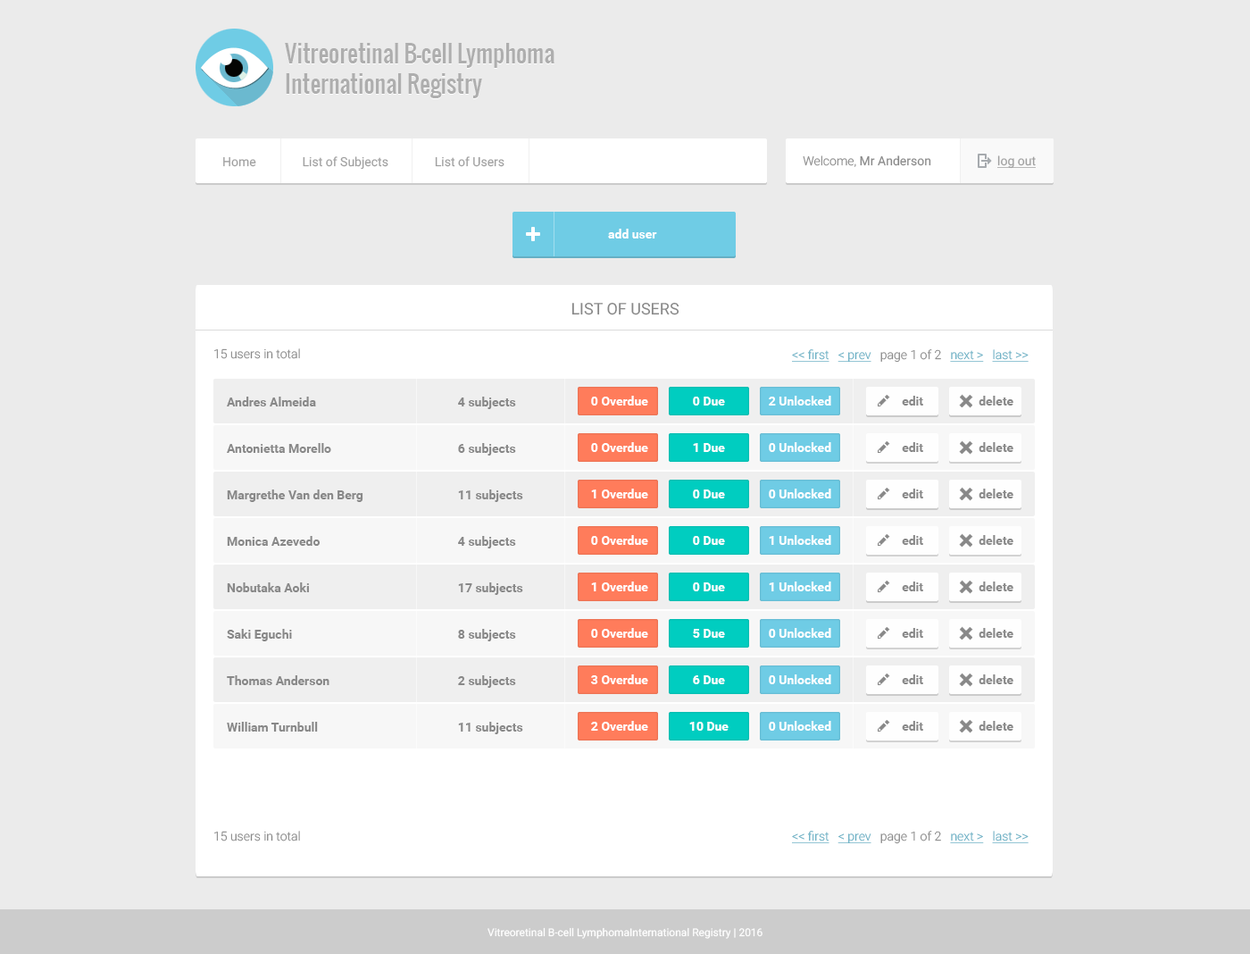
<style>
.page{position:relative;width:1250px;height:954px;background:#ebebeb}
.page>*{position:absolute;margin:0}
.t1{font:23.2px/30.4px "Oswald-Regular";color:#aeaeae}
.t2{font:12.5px "Roboto-Regular";color:#a0a0a0}
.t3{font:12.5px "Roboto-Regular";color:#888888}
.t4{font:12.5px "Roboto-Light";color:#888888}
.t5{font:12.5px "Roboto-Regular";color:#a0a0a0;text-decoration:underline}
.t6{font:12.5px "Roboto-Bold";color:#ffffff}
.t7{font:16.1px "Roboto-Regular";color:#888888;text-transform:uppercase}
.t8{font:12.5px "Roboto-Light";color:#65afc4;text-decoration:underline}
.t9{font:12.5px "Roboto-Bold";color:#888888}
.t10{font:10.7px "Roboto-Regular";color:#ffffff}
</style>
<div class="page">
<p class="t1" style="left:285px;top:44px;width:270px;height:55px">Vitreoretinal B-cell Lymphoma<br>International Registry</p>
<p class="t1" style="left:285px;top:43px;width:270px;height:55px">Vitreoretinal B-cell Lymphoma<br>International Registry</p>
<p class="t2" style="left:223px;top:156px;width:282px;height:14px">Home               List of Subjects               List of Users</p>
<p class="t3" style="left:803px;top:155px;width:128px;height:12px"><span class="t4">Welcome, </span>Mr Anderson</p>
<p class="t5" style="left:998px;top:155px;width:38px;height:14px">log out</p>
<p class="t6" style="left:608px;top:229px;width:49px;height:9px">add user</p>
<p class="t7" style="left:572px;top:302px;width:108px;height:13px">List of USERS</p>
<p class="t4" style="left:214px;top:348px;width:86px;height:11px">15 users in total</p>
<p class="t8" style="left:792px;top:349px;width:237px;height:14px">&lt;&lt; first   &lt; prev   <span class="t4">page 1 of 2   </span>next &gt;   last &gt;&gt;</p>
<p class="t9" style="left:227px;top:397px;width:89px;height:9px">Andres Almeida</p>
<p class="t9" style="left:458px;top:397px;width:58px;height:12px">4 subjects</p>
<p class="t6" style="left:591px;top:396px;width:57px;height:9px">0 Overdue</p>
<p class="t6" style="left:693px;top:397px;width:32px;height:8px">0 Due</p>
<p class="t6" style="left:769px;top:396px;width:62px;height:9px">2 Unlocked</p>
<p class="t9" style="left:902px;top:396px;width:21px;height:9px">edit</p>
<p class="t9" style="left:979px;top:396px;width:35px;height:9px">delete</p>
<p class="t9" style="left:227px;top:443px;width:104px;height:10px">Antonietta Morello</p>
<p class="t9" style="left:458px;top:443px;width:58px;height:12px">6 subjects</p>
<p class="t6" style="left:591px;top:442px;width:57px;height:10px">0 Overdue</p>
<p class="t6" style="left:693px;top:443px;width:32px;height:9px">1 Due</p>
<p class="t6" style="left:769px;top:442px;width:62px;height:10px">0 Unlocked</p>
<p class="t9" style="left:902px;top:442px;width:21px;height:10px">edit</p>
<p class="t9" style="left:979px;top:442px;width:35px;height:10px">delete</p>
<p class="t9" style="left:227px;top:489px;width:136px;height:13px">Margrethe Van den Berg</p>
<p class="t9" style="left:458px;top:489px;width:65px;height:13px">11 subjects</p>
<p class="t6" style="left:591px;top:488px;width:57px;height:10px">1 Overdue</p>
<p class="t6" style="left:693px;top:489px;width:32px;height:9px">0 Due</p>
<p class="t6" style="left:769px;top:488px;width:62px;height:10px">0 Unlocked</p>
<p class="t9" style="left:902px;top:488px;width:21px;height:10px">edit</p>
<p class="t9" style="left:979px;top:488px;width:35px;height:10px">delete</p>
<p class="t9" style="left:227px;top:536px;width:94px;height:10px">Monica Azevedo</p>
<p class="t9" style="left:458px;top:536px;width:58px;height:12px">4 subjects</p>
<p class="t6" style="left:591px;top:535px;width:57px;height:10px">0 Overdue</p>
<p class="t6" style="left:693px;top:536px;width:32px;height:9px">0 Due</p>
<p class="t6" style="left:769px;top:535px;width:62px;height:10px">1 Unlocked</p>
<p class="t9" style="left:902px;top:535px;width:21px;height:10px">edit</p>
<p class="t9" style="left:979px;top:535px;width:35px;height:10px">delete</p>
<p class="t6" style="left:591px;top:581px;width:57px;height:10px">1 Overdue</p>
<p class="t6" style="left:769px;top:581px;width:62px;height:10px">1 Unlocked</p>
<p class="t9" style="left:902px;top:581px;width:21px;height:10px">edit</p>
<p class="t9" style="left:979px;top:581px;width:35px;height:10px">delete</p>
<p class="t9" style="left:227px;top:582px;width:82px;height:10px">Nobutaka Aoki</p>
<p class="t9" style="left:458px;top:582px;width:65px;height:13px">17 subjects</p>
<p class="t6" style="left:693px;top:582px;width:32px;height:9px">0 Due</p>
<p class="t9" style="left:227px;top:629px;width:65px;height:12px">Saki Eguchi</p>
<p class="t9" style="left:458px;top:629px;width:58px;height:12px">8 subjects</p>
<p class="t6" style="left:591px;top:628px;width:57px;height:10px">0 Overdue</p>
<p class="t6" style="left:693px;top:629px;width:32px;height:9px">5 Due</p>
<p class="t6" style="left:769px;top:628px;width:62px;height:10px">0 Unlocked</p>
<p class="t9" style="left:902px;top:628px;width:21px;height:10px">edit</p>
<p class="t9" style="left:979px;top:628px;width:35px;height:10px">delete</p>
<p class="t9" style="left:227px;top:675px;width:103px;height:10px">Thomas Anderson</p>
<p class="t9" style="left:458px;top:675px;width:58px;height:13px">2 subjects</p>
<p class="t6" style="left:591px;top:674px;width:57px;height:10px">3 Overdue</p>
<p class="t6" style="left:693px;top:675px;width:32px;height:9px">6 Due</p>
<p class="t6" style="left:769px;top:674px;width:62px;height:10px">0 Unlocked</p>
<p class="t9" style="left:902px;top:674px;width:21px;height:10px">edit</p>
<p class="t9" style="left:979px;top:674px;width:35px;height:10px">delete</p>
<p class="t9" style="left:227px;top:722px;width:91px;height:9px">William Turnbull</p>
<p class="t9" style="left:458px;top:722px;width:65px;height:12px">11 subjects</p>
<p class="t6" style="left:591px;top:721px;width:57px;height:10px">2 Overdue</p>
<p class="t6" style="left:689px;top:722px;width:40px;height:9px">10 Due</p>
<p class="t6" style="left:769px;top:721px;width:62px;height:10px">0 Unlocked</p>
<p class="t9" style="left:902px;top:721px;width:21px;height:10px">edit</p>
<p class="t9" style="left:979px;top:721px;width:35px;height:10px">delete</p>
<p class="t4" style="left:214px;top:831px;width:86px;height:10px">15 users in total</p>
<p class="t8" style="left:792px;top:831px;width:237px;height:13px">&lt;&lt; first   &lt; prev   <span class="t4">page 1 of 2   </span>next &gt;   last &gt;&gt;</p>
<p class="t10" style="left:488px;top:927px;width:275px;height:12px">Vitreoretinal B-cell LymphomaInternational Registry | 2016</p>
</div>
